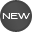
<style>
.page{position:relative;width:32px;height:32px;background:#ffffff}
.page>*{position:absolute;margin:0}
.t1{font:7.7px "Vonnes-ThinExtended";color:#ffffff;scale:1.16 1}
</style>
<div class="page">
<p class="t1" style="left:2px;top:13px;width:28px;height:6px">NEW</p>
</div>
